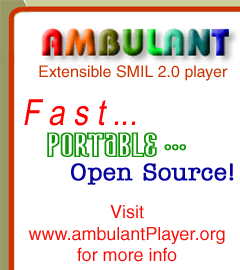
<style>
.page{position:relative;width:240px;height:270px;background:#ffffff}
.page>*{position:absolute;margin:0}
.t1{font:16px "Helvetica";color:#cc3300}
.t2{font:36px "ArialNarrow";color:#ff0000;font-style:italic}
.t3{font:30px "AvatarOutline";color:#0f9505;font-weight:bold}
.t4{font:24px "AmericanTypewriter-Medium";color:#0602a0;font-weight:bold}
.t5{font:18px "Helvetica";color:#f80c06}
</style>
<div class="page">
<p class="t1" style="left:39px;top:65px;width:189px;height:16px">Extensible SMIL 2.0 player</p>
<p class="t2" style="left:24px;top:99px;width:112px;height:27px">F a s t ...</p>
<p class="t3" style="left:47px;top:132px;width:139px;height:25px">Portable ...</p>
<p class="t4" style="left:71px;top:163px;width:163px;height:22px">Open Source!</p>
<p class="t5" style="left:28px;top:205px;width:197px;height:57px;text-align:center">Visit<br>www.ambulantPlayer.org<br>for more info</p>
</div>
